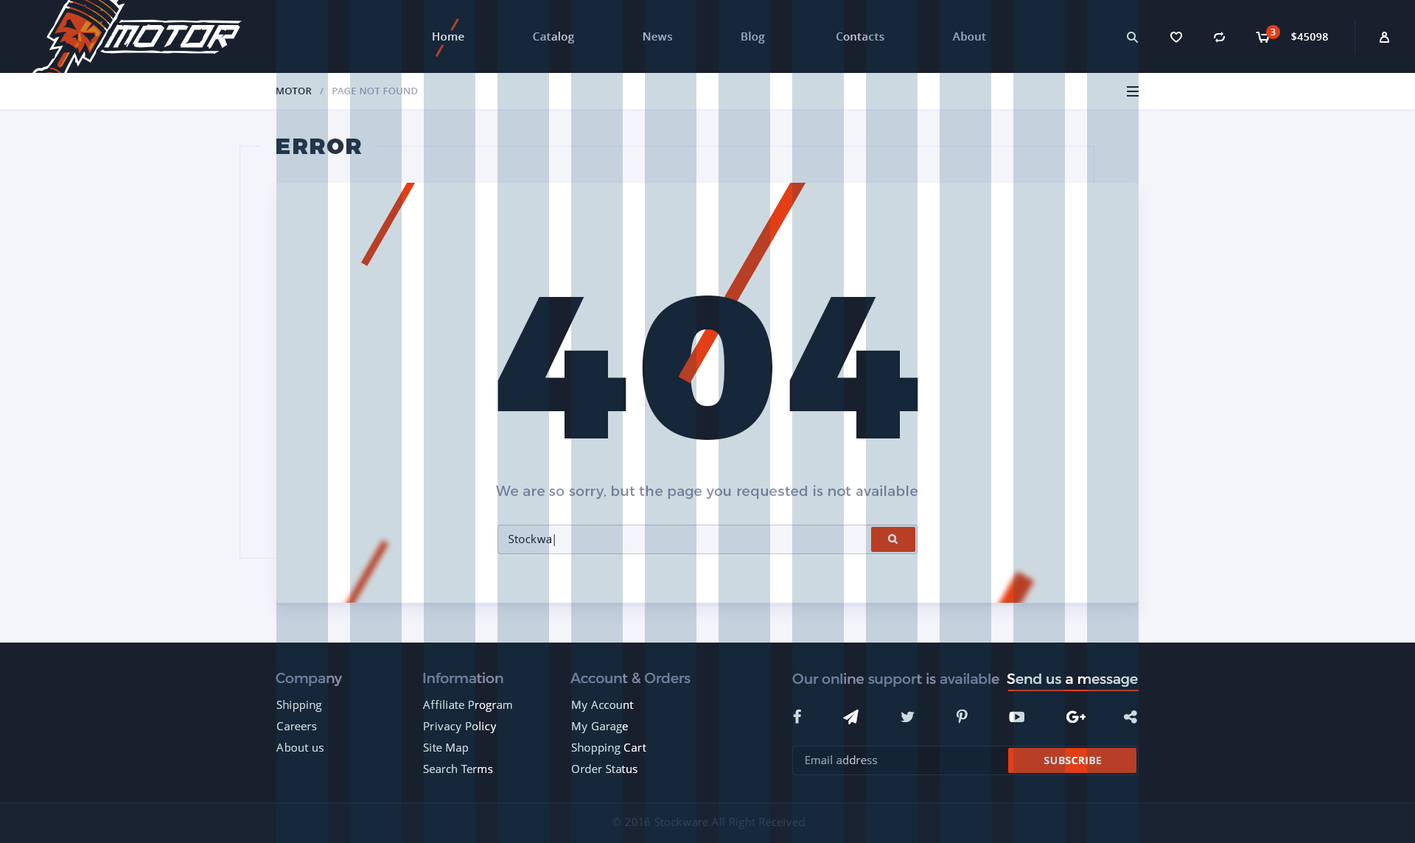
<style>
.page{position:relative;width:1415px;height:843px;background:#f4f5fb}
.page>*{position:absolute;margin:0}
.t1{font:8.8px "OpenSans-Bold";color:#ffffff}
.t2{font:11.1px "OpenSans-Semibold";letter-spacing:0.02em}
.t3{font:10.3px "OpenSans-Semibold";letter-spacing:0.02em;color:#ffffff;text-transform:uppercase}
.t4{font:9.6px "OpenSans-Semibold";letter-spacing:0.02em;text-transform:uppercase}
.t5{font:22.1px "Montserrat-Black";letter-spacing:0.06em;color:#283346}
.t6{font:201.9px "Montserrat-Black";letter-spacing:0.06em;color:#18202e}
.t7{font:14px "Montserrat-Regular";letter-spacing:0.02em;color:#6d7d99}
.t8{font:11.1px "OpenSans";letter-spacing:0.02em;color:#161d29}
.t9{font:14px "Montserrat-Regular";color:#6d7d99}
.t10{font:14px "Montserrat-Regular"}
.t11{font:11.1px/21.4px "OpenSans";letter-spacing:0.02em;color:#cdd9e0}
.t12{font:11.1px "OpenSans";letter-spacing:0.02em}
.t13{font:10.3px "OpenSans-Bold";letter-spacing:0.02em}
.t14{font:11.1px "OpenSans";letter-spacing:0.02em;color:#324057}
</style>
<div class="page">
<p class="t1" style="left:1270px;top:29px;width:5px;height:6px">3</p>
<p class="t2" style="left:433px;top:32px;width:553px;height:11px">Home                      Catalog                      News                      Blog                       Contacts                      About</p>
<p class="t3" style="left:1291px;top:32px;width:37px;height:9px">$45098</p>
<p class="t4" style="left:276px;top:88px;width:142px;height:6px">Motor   /   Page Not Found</p>
<p class="t5" style="left:276px;top:139px;width:86px;height:15px">ERROR</p>
<p class="t6" style="left:497px;top:295px;width:421px;height:145px">404</p>
<p class="t7" style="left:496px;top:485px;width:421px;height:14px">We are so sorry, but the page you requested is not available</p>
<p class="t8" style="left:508px;top:534px;width:47px;height:12px">Stockwa|</p>
<p class="t9" style="left:276px;top:673px;width:66px;height:13px">Company</p>
<p class="t9" style="left:423px;top:672px;width:80px;height:11px">Information</p>
<p class="t9" style="left:570px;top:673px;width:120px;height:11px">Account &amp; Orders</p>
<p class="t10" style="left:792px;top:673px;width:346px;height:14px">Our online support is available  Send us a message</p>
<p class="t11" style="left:276px;top:700px;width:47px;height:52px">Shipping<br>Careers<br>About us</p>
<p class="t11" style="left:423px;top:700px;width:89px;height:73px">Affiliate Program<br>Privacy Policy<br>Site Map<br>Search Terms</p>
<p class="t11" style="left:571px;top:701px;width:75px;height:72px">My Account<br>My Garage<br>Shopping Cart<br>Order Status</p>
<p class="t12" style="left:805px;top:755px;width:72px;height:9px">Email address</p>
<p class="t13" style="left:1044px;top:757px;width:57px;height:7px">SUBSCRIBE</p>
<p class="t14" style="left:612px;top:817px;width:193px;height:12px">© 2016 Stockware All Right Received</p>
</div>
